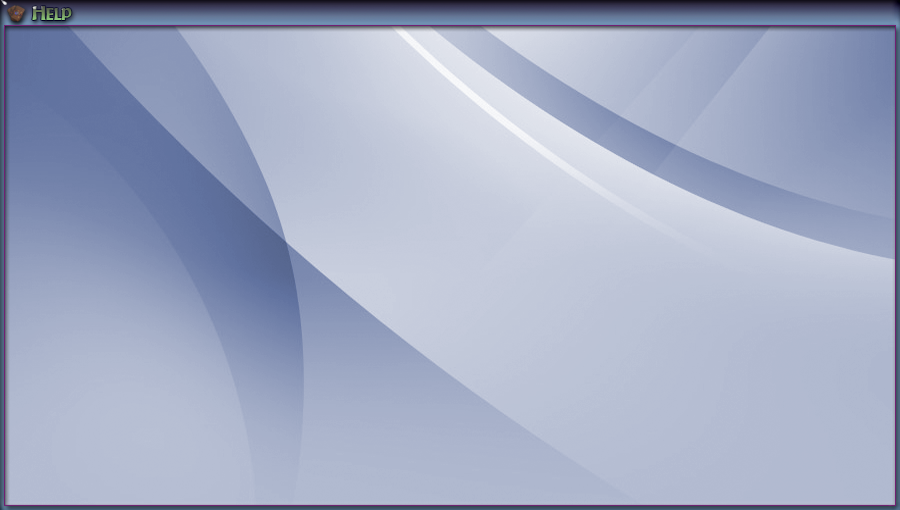
<style>
.page{position:relative;width:900px;height:510px}
.page>*{position:absolute;margin:0}
.t1{font:20px "LHFUncialCaps"}
</style>
<div class="page">
<p class="t1" style="left:32px;top:6px;width:40px;height:14px">Help</p>
</div>
